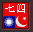
<style>
.page{position:relative;width:33px;height:32px;background:#333333}
.page>*{position:absolute;margin:0}
.t1{font:10.4px "SimSun";color:#ffffff}
</style>
<div class="page">
<p class="t1" style="left:5px;top:4px;width:20px;height:9px">七四</p>
</div>
